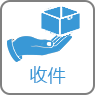
<style>
.page{position:relative;width:95px;height:95px;background:#ffffff}
.page>*{position:absolute;margin:0}
.t1{font:18px "MicrosoftYaHei";color:#3998d6}
</style>
<div class="page">
<p class="t1" style="left:30px;top:66px;width:36px;height:18px">收件</p>
</div>
